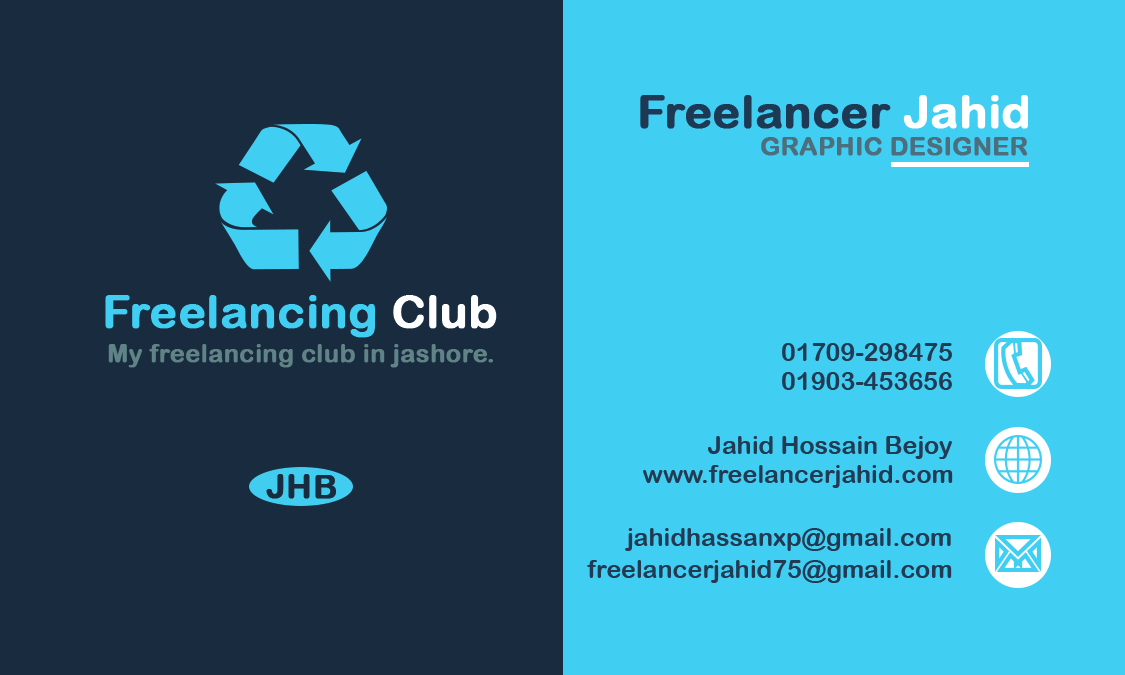
<style>
.page{position:relative;width:1125px;height:675px;background:#41cef3}
.page>*{position:absolute;margin:0}
.t1{font:45.8px "ArialRoundedMTBold";color:#1d3954;font-weight:bold}
.t2{font:45.8px "ArialRoundedMTBold";color:#ffffff;font-weight:bold}
.t3{font:25px "ArialRoundedMTBold";color:#4c6e7e;font-weight:bold}
.t4{font:45.8px "ArialRoundedMTBold";color:#41cef3;font-weight:bold}
.t5{font:25px "ArialRoundedMTBold";color:#618386;font-weight:bold}
.t6{font:25px "ArialRoundedMTBold";color:#223c53;text-transform:uppercase}
.t7{font:25px "ArialRoundedMTBold";color:#223c53}
.t8{font:33.3px "ArialRoundedMTBold";color:#192c3f;font-weight:bold}
</style>
<div class="page">
<p class="t1" style="left:640px;top:95px;width:388px;height:34px">Freelancer <span class="t2">Jahid</span></p>
<p class="t3" style="left:761px;top:137px;width:267px;height:19px">GRAPHIC DESIGNER</p>
<p class="t4" style="left:105px;top:295px;width:392px;height:43px">Freelancing <span class="t2">Club</span></p>
<p class="t5" style="left:108px;top:344px;width:385px;height:24px">My freelancing club in jashore.</p>
<p class="t6" style="left:782px;top:343px;width:170px;height:18px">01709-298475</p>
<p class="t6" style="left:782px;top:372px;width:170px;height:18px">01903-453656</p>
<p class="t7" style="left:708px;top:436px;width:244px;height:23px">Jahid Hossain Bejoy</p>
<p class="t7" style="left:643px;top:465px;width:310px;height:23px">www.freelancerjahid.com</p>
<p class="t8" style="left:266px;top:474px;width:70px;height:25px">JHB</p>
<p class="t7" style="left:625px;top:528px;width:326px;height:23px">jahidhassanxp@gmail.com</p>
<p class="t7" style="left:587px;top:560px;width:365px;height:23px">freelancerjahid75@gmail.com</p>
</div>
